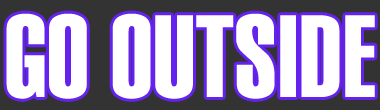
<style>
.page{position:relative;width:380px;height:110px;background:#ffffff}
.page>*{position:absolute;margin:0}
.t1{font:114.7px "HelveticaLT-ExtraCompressed";color:#ffffff}
</style>
<div class="page">
<p class="t1" style="left:6px;top:13px;width:369px;height:86px">GO OUTSIDE</p>
</div>
